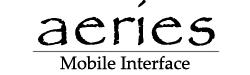
<style>
.page{position:relative;width:250px;height:75px;background:#ffffff}
.page>*{position:absolute;margin:0}
.t1{font:72px "Papyrus-Regular";color:#000000}
.t2{font:18px "PalatinoLinotype-Roman";color:#000000}
</style>
<div class="page">
<p class="t1" style="left:38px;top:0px;width:177px;height:46px">aeries</p>
<p class="t2" style="left:60px;top:55px;width:130px;height:15px">Mobile Interface</p>
</div>
